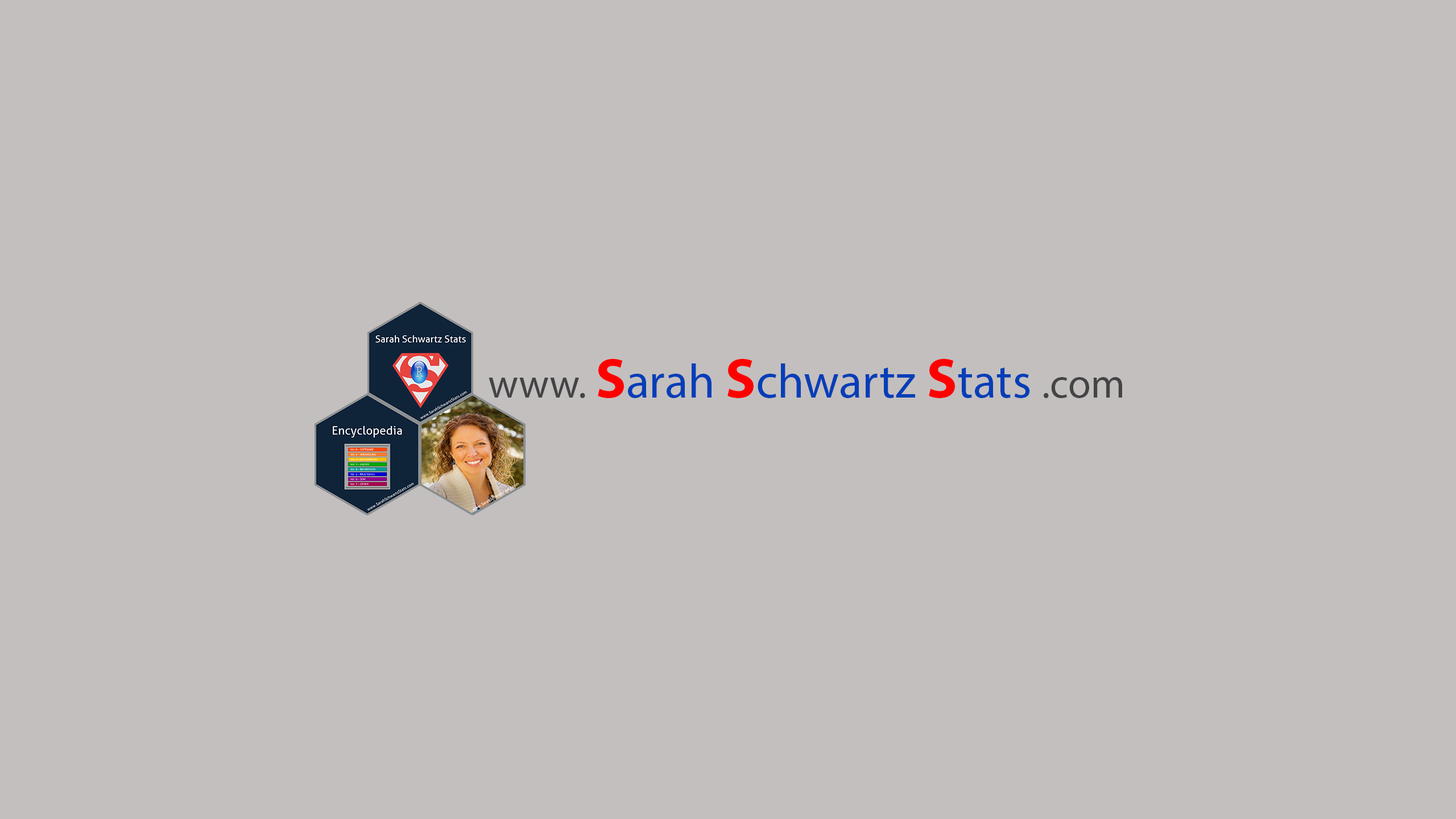
<style>
.page{position:relative;width:1456px;height:819px;background:#c3bfbf}
.page>*{position:absolute;margin:0}
.t1{font:48.3px "MyriadPro-Regular";color:#063eb7}
.t2{font:40.9px "MyriadPro-Regular";color:#444445}
.t3{font:56.9px "MyriadPro-Bold";color:#ff0000}
</style>
<div class="page">
<p class="t1" style="left:489px;top:359px;width:633px;height:39px"><span class="t2">www. </span><span class="t3">S</span>arah <span class="t3">S</span>chwartz <span class="t3">S</span>tats <span class="t2">.com</span></p>
</div>
